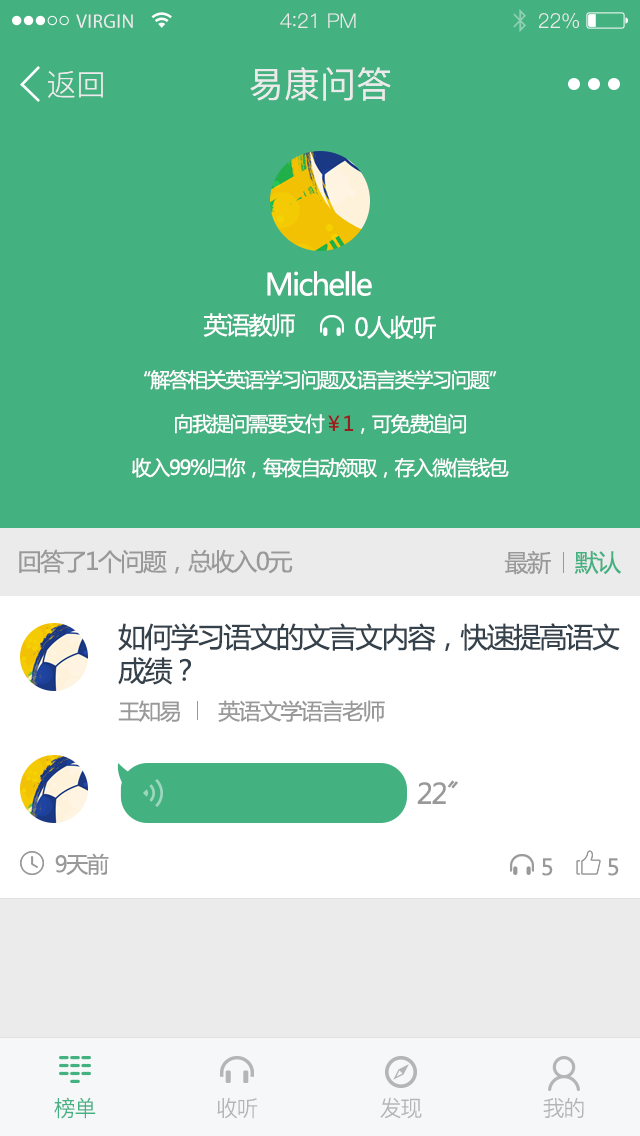
<style>
.page{position:relative;width:640px;height:1136px;background:#44b181}
.page>*{position:absolute;margin:0}
.t1{font:19.6px "MyriadPro-Regular";letter-spacing:0.02em;color:#ebebeb}
.t2{font:20.4px "PingFang-SC-Regular";letter-spacing:-0.02em;color:#ebebeb}
.t3{font:22.1px "PingFang-SC-Regular";letter-spacing:-0.02em;color:#ebebeb}
.t4{font:30px "PingFang-SC-Regular";color:#ebebeb}
.t5{font:36px "PingFang-SC-Medium";color:#ebebeb}
.t6{font:30px "MicrosoftYaHei";letter-spacing:-0.06em;color:#ffffff}
.t7{font:24px "MicrosoftYaHei";letter-spacing:-0.06em;color:#ffffff}
.t8{font:20px "MicrosoftYaHei";letter-spacing:-0.06em;color:#ffffff}
.t9{font:20px "MicrosoftYaHei";letter-spacing:-0.06em;color:#9a1e1e}
.t10{font:24px "MicrosoftYaHei";letter-spacing:-0.06em;color:#999999}
.t11{font:24px "MicrosoftYaHei";letter-spacing:-0.06em;color:#44b181}
.t12{font:28px "MicrosoftYaHei";letter-spacing:-0.06em;color:#35424b}
.t13{font:22px "MicrosoftYaHei";letter-spacing:-0.06em;color:#999999}
.t14{font:28px "MicrosoftYaHei";letter-spacing:-0.06em;color:#999999}
.t15{font:22px "PingFang-SC-Regular";letter-spacing:-0.06em;color:#44b181}
.t16{font:22px "PingFang-SC-Regular";letter-spacing:-0.06em;color:#b4b5b6}
</style>
<div class="page">
<p class="t1" style="left:76px;top:14px;width:57px;height:14px">VIRGIN</p>
<p class="t2" style="left:280px;top:13px;width:76px;height:15px">4<span class="t3">:</span>21 PM</p>
<p class="t2" style="left:539px;top:13px;width:40px;height:16px">22%</p>
<p class="t4" style="left:48px;top:71px;width:55px;height:27px">返回</p>
<p class="t5" style="left:250px;top:67px;width:141px;height:34px">易康问答</p>
<p class="t6" style="left:267px;top:271px;width:105px;height:25px">Michelle</p>
<p class="t7" style="left:203px;top:313px;width:92px;height:24px">英语教师</p>
<p class="t7" style="left:355px;top:315px;width:81px;height:24px">0人收听</p>
<p class="t8" style="left:144px;top:370px;width:353px;height:20px">“解答相关英语学习问题及语言类学习问题”</p>
<p class="t8" style="left:175px;top:413px;width:291px;height:21px">向我提问需要支付<span class="t9">￥1</span>，可免费追问</p>
<p class="t8" style="left:132px;top:458px;width:377px;height:20px">收入99%归你，每夜自动领取，存入微信钱包</p>
<p class="t10" style="left:19px;top:549px;width:274px;height:25px">回答了1个问题，总收入0元</p>
<p class="t10" style="left:504px;top:550px;width:47px;height:25px">最新</p>
<p class="t11" style="left:574px;top:551px;width:47px;height:24px">默认</p>
<p class="t12" style="left:118px;top:623px;width:502px;height:62px">如何学习语文的文言文内容，快速提高语文<br>成绩？</p>
<p class="t13" style="left:118px;top:700px;width:62px;height:22px">王知易</p>
<p class="t13" style="left:218px;top:700px;width:167px;height:22px">英语文学语言老师</p>
<p class="t14" style="left:417px;top:780px;width:41px;height:24px">22〞</p>
<p class="t13" style="left:55px;top:853px;width:54px;height:22px">9天前</p>
<p class="t13" style="left:542px;top:858px;width:11px;height:18px">5</p>
<p class="t13" style="left:608px;top:858px;width:11px;height:18px">5</p>
<p class="t15" style="left:54px;top:1097px;width:42px;height:22px">榜单</p>
<p class="t16" style="left:380px;top:1097px;width:42px;height:22px">发现</p>
<p class="t16" style="left:543px;top:1097px;width:41px;height:21px">我的</p>
<p class="t16" style="left:217px;top:1098px;width:41px;height:21px">收听</p>
</div>
